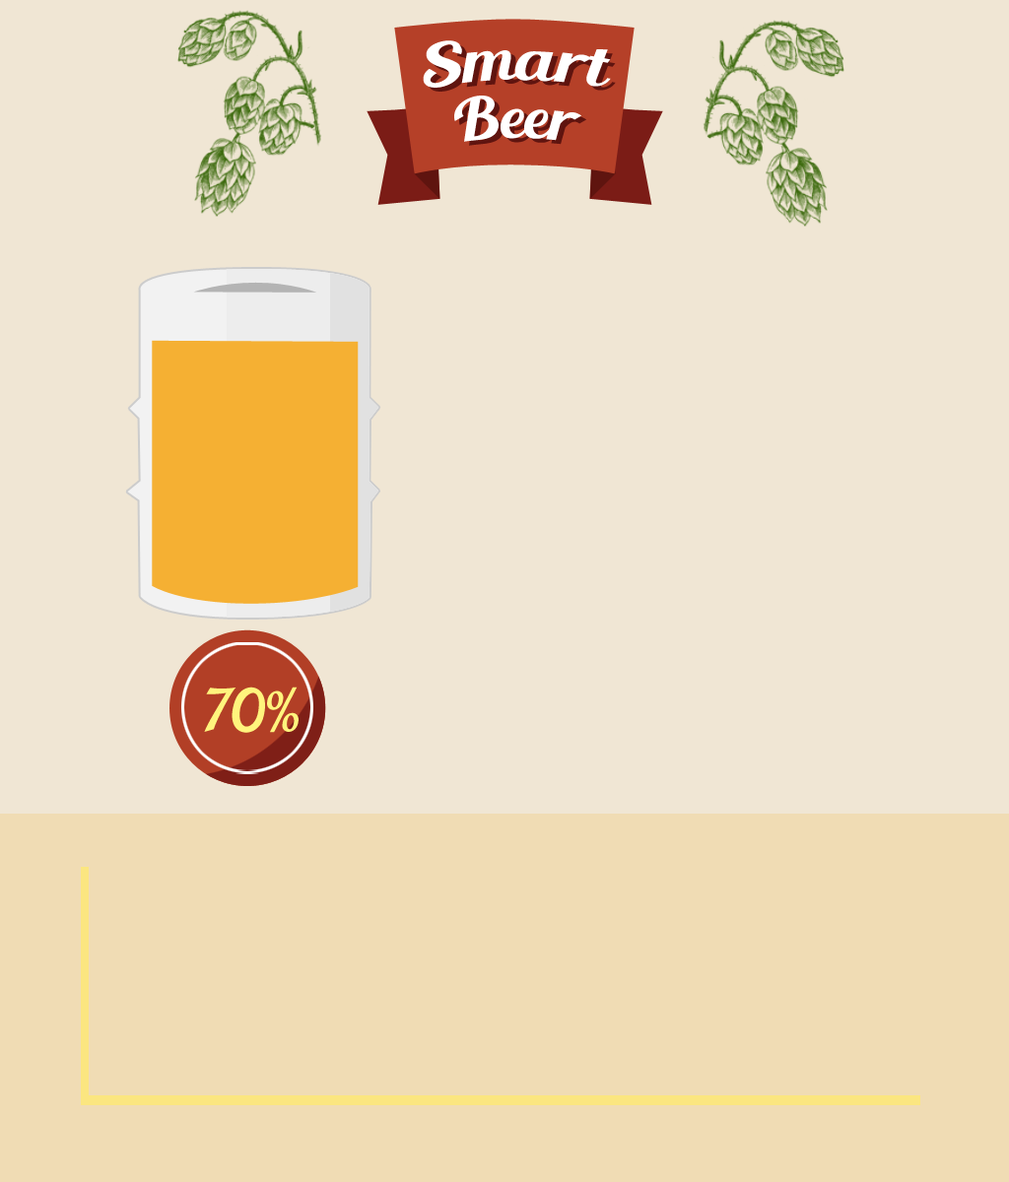
<style>
.page{position:relative;width:1009px;height:1182px;background:#f0e6d4}
.page>*{position:absolute;margin:0}
.t1{font:59.1px "BlendaScript";color:#ffffff}
.t2{font:59.1px "BlendaScript";color:#fff47d}
</style>
<div class="page">
<p class="t1" style="left:423px;top:40px;width:188px;height:102px;text-align:center">Smart<br>Beer</p>
<p class="t2" style="left:204px;top:687px;width:94px;height:46px">70%</p>
</div>
